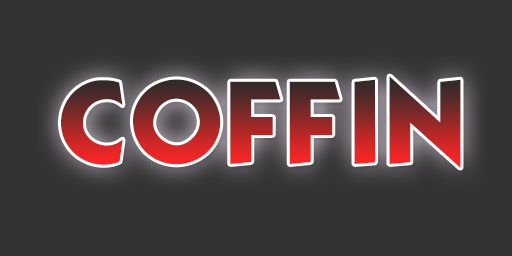
<style>
.page{position:relative;width:512px;height:256px;background:#333333}
.page>*{position:absolute;margin:0}
.t1{font:100px "KabelBdNormal"}
</style>
<div class="page">
<p class="t1" style="left:61px;top:76px;width:400px;height:92px">COFFIN</p>
</div>
